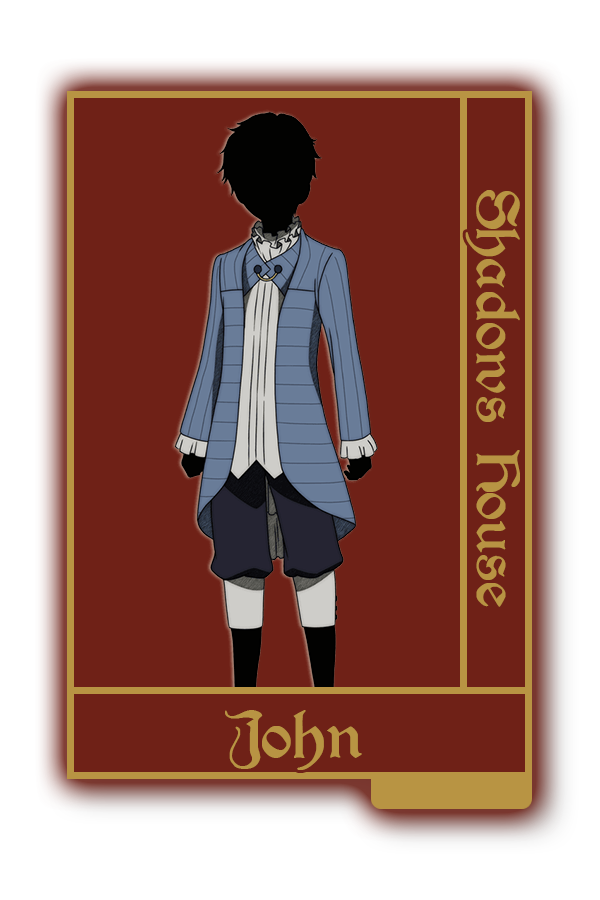
<style>
.page{position:relative;width:600px;height:900px;background:#6f2117}
.page>*{position:absolute;margin:0}
.t1{font:67.9px "Augusta-Regular";color:#b89443}
.t2{font:75px "Augusta-Regular";color:#b89443}
</style>
<div class="page">
<p class="t1" style="left:465px;top:190px;width:55px;height:417px;rotate:90deg">Shadows House</p>
<p class="t2" style="left:225px;top:710px;width:137px;height:60px">John</p>
</div>
